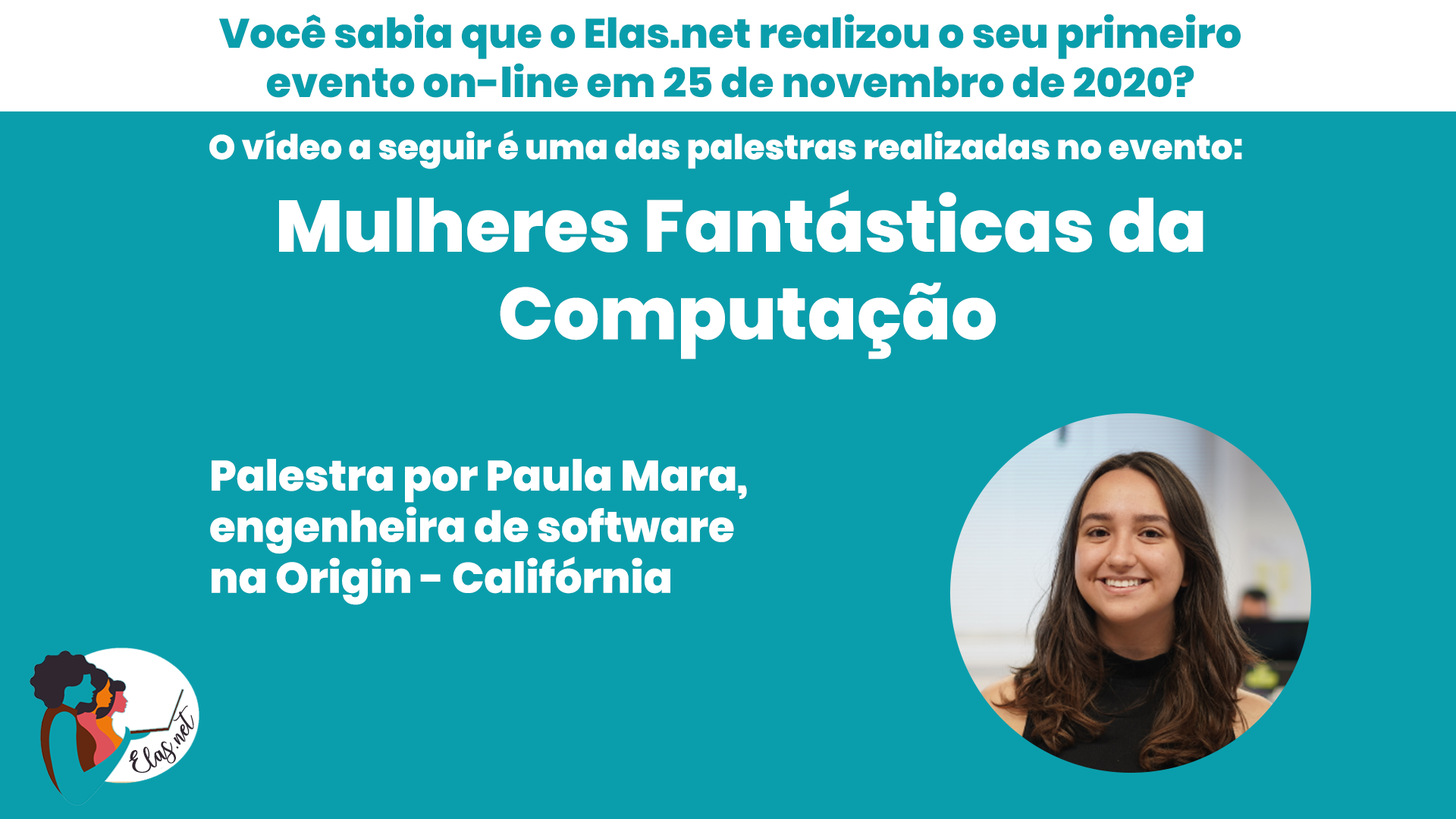
<style>
.page{position:relative;width:1456px;height:819px;background:#0a9eac}
.page>*{position:absolute;margin:0}
.t1{font:41px "Poppins-ExtraBold";color:#0a9eac}
.t2{font:34.2px "Poppins-ExtraBold";color:#ffffff}
.t3{font:72.9px "Poppins-ExtraBold";color:#ffffff}
.t4{font:42.6px "Poppins-ExtraBold";color:#ffffff}
.t5{font:19px "charlinda-Regular";color:#2f262f;scale:1.18 1}
</style>
<div class="page">
<p class="t1" style="left:218px;top:14px;width:1023px;height:84px;text-align:center">Você sabia que o Elas.net realizou o seu primeiro<br>evento on-line em 25 de novembro de 2020?</p>
<p class="t2" style="left:209px;top:130px;width:1033px;height:39px">O vídeo a seguir é uma das palestras realizadas no evento:</p>
<p class="t3" style="left:279px;top:190px;width:924px;height:169px;text-align:center">Mulheres Fantásticas da <br>Computação</p>
<p class="t4" style="left:210px;top:459px;width:537px;height:146px">Palestra por Paula Mara, <br>engenheira de software <br>na Origin - Califórnia</p>
<p class="t5" style="left:129px;top:705px;width:65px;height:68px;rotate:-43deg">Elas.net</p>
</div>
